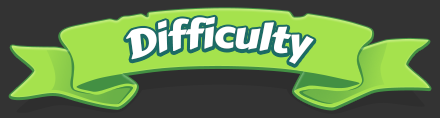
<style>
.page{position:relative;width:440px;height:118px;background:#333333}
.page>*{position:absolute;margin:0}
.t1{font:38px "CarterOne";letter-spacing:-0.02em;color:#ffffff}
</style>
<div class="page">
<p class="t1" style="left:126px;top:16px;width:188px;height:48px">Difficulty</p>
</div>
